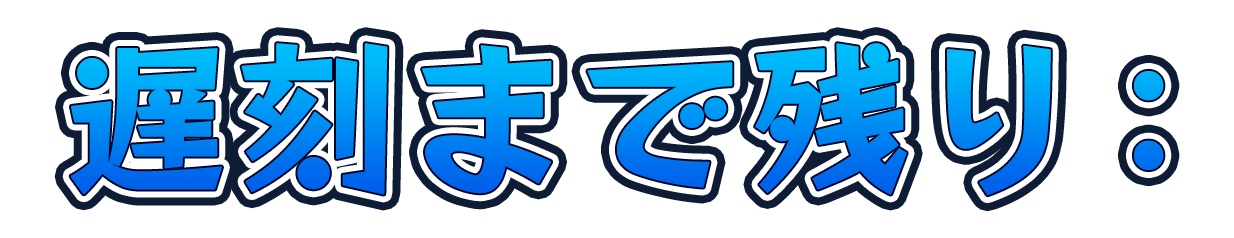
<style>
.page{position:relative;width:1234px;height:238px;background:#ffffff}
.page>*{position:absolute;margin:0}
.t1{font:166.7px "RocknRollOne-Regular";font-weight:bold}
</style>
<div class="page">
<p class="t1" style="left:70px;top:43px;width:1094px;height:153px">遅刻まで残り：</p>
</div>
